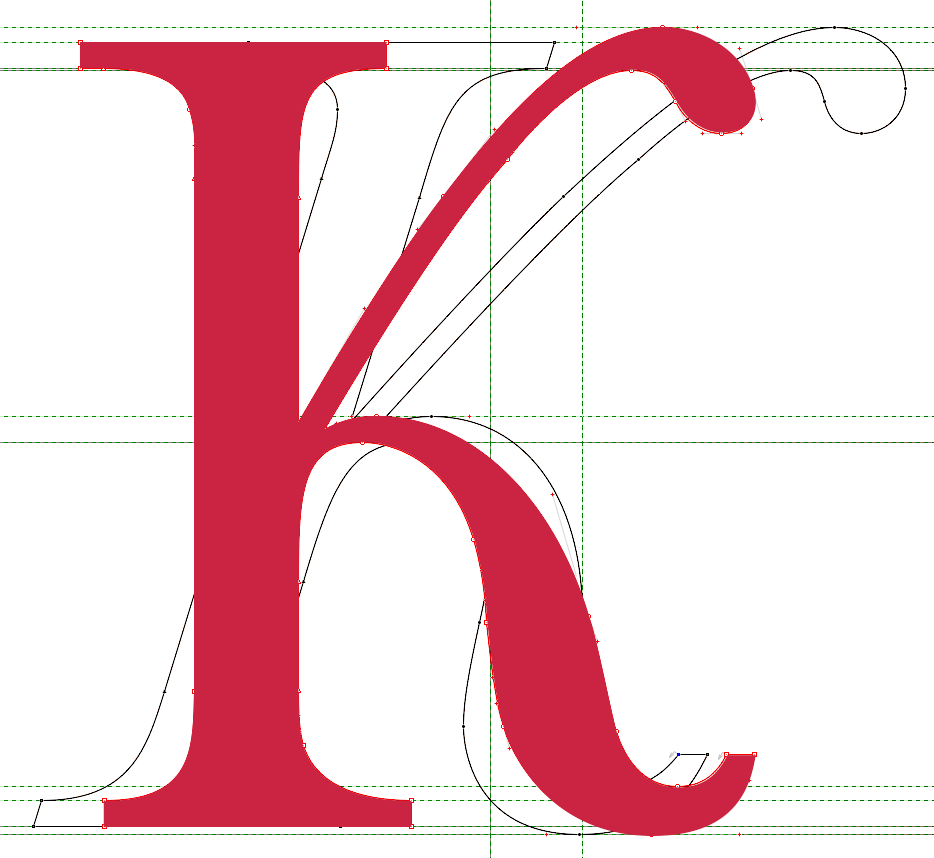
<style>
.page{position:relative;width:934px;height:858px;background:#ffffff}
.page>*{position:absolute;margin:0}
.t1{font:1186.6px "Baskalicaraktuell";color:#cb2443}
</style>
<div class="page">
<p class="t1" style="left:79px;top:27px;width:677px;height:810px">K</p>
</div>
